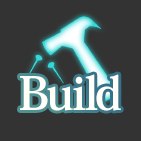
<style>
.page{position:relative;width:141px;height:141px;background:#333333}
.page>*{position:absolute;margin:0}
.t1{font:48px "HeiseiMinStd-W7";letter-spacing:-0.04em;color:#fffef9}
</style>
<div class="page">
<p class="t1" style="left:20px;top:74px;width:101px;height:37px">Build</p>
</div>
